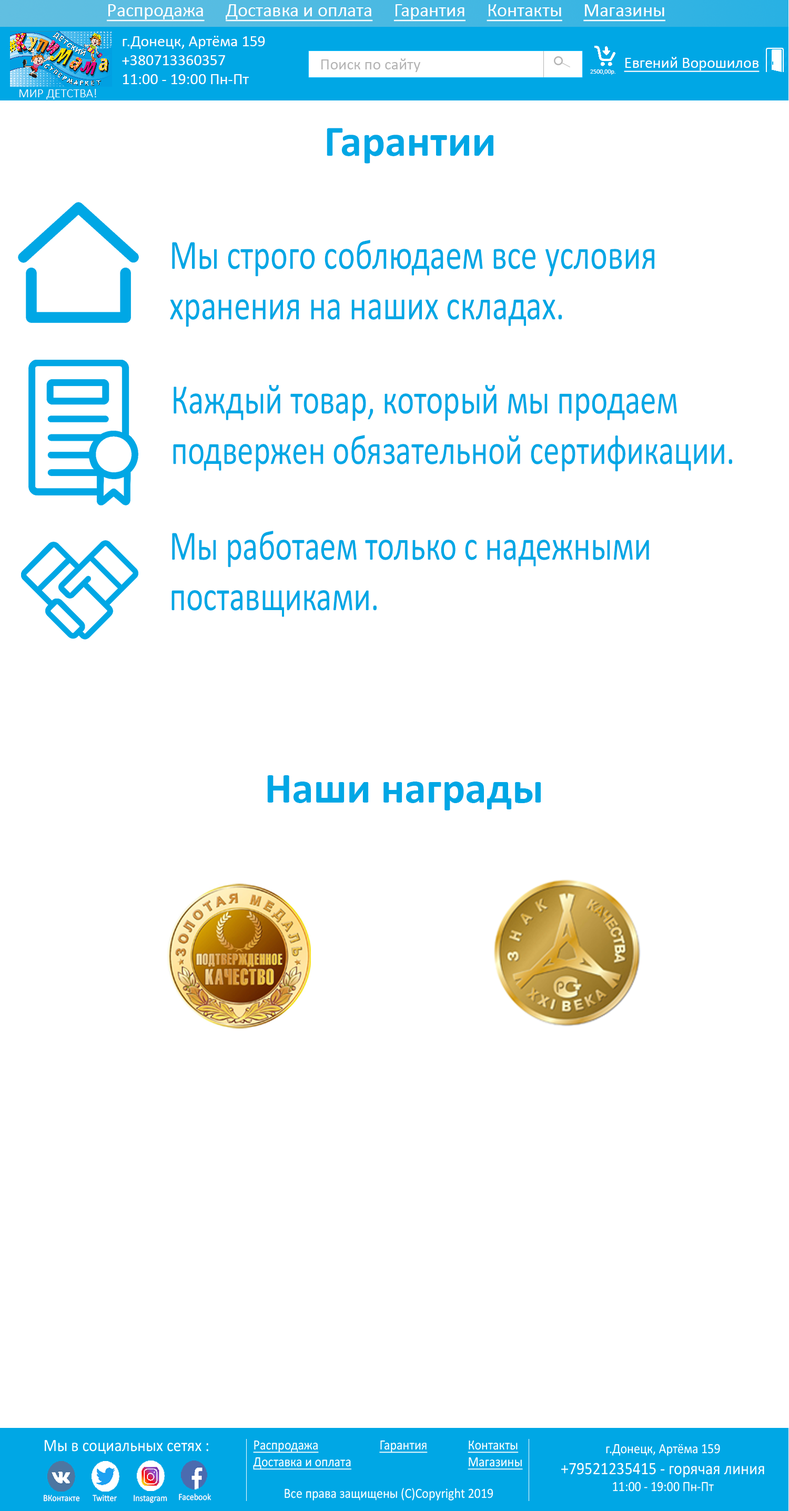
<style>
.page{position:relative;width:789px;height:1511px;background:#ffffff}
.page>*{position:absolute;margin:0}
.t1{font:18.9px "Calibri";color:#ffffff;text-decoration:underline}
.t2{font:15.8px "Calibri";color:#ffffff}
.t3{font:15.8px "Calibri";color:#b3b3b3}
.t4{font:15.8px "Calibri";color:#ffffff;text-decoration:underline}
.t5{font:6.3px "Calibri";color:#ffffff}
.t6{font:12.6px "Calibri-Light";color:#ffffff}
.t7{font:43.7px "Calibri-Bold";color:#00a7e5}
.t8{font:42.1px "Calibri";color:#00a7e5;scale:0.78 1}
.t9{font:42.1px "Calibri";color:#00a7e5;scale:0.77 1}
.t10{font:17.5px "Calibri";color:#ffffff;scale:0.9 1}
.t11{font:14px "Calibri";color:#ffffff;text-decoration:underline;scale:0.9 1}
.t12{font:14px "Calibri";color:#ffffff;scale:0.9 1}
.t13{font:9.3px "Calibri";color:#ffffff;scale:0.9 1}
</style>
<div class="page">
<p class="t1" style="left:107px;top:4px;width:558px;height:18px">Распродажа     Доставка и оплата     Гарантия     Контакты     Магазины</p>
<p class="t2" style="left:122px;top:36px;width:143px;height:48px">г.Донецк, Артёма 159<br>+380713360357<br>11:00 - 19:00 Пн-Пт</p>
<p class="t3" style="left:321px;top:58px;width:99px;height:14px">Поиск по сайту</p>
<p class="t4" style="left:624px;top:57px;width:136px;height:15px">Евгений Ворошилов</p>
<p class="t5" style="left:590px;top:69px;width:25px;height:6px">2500,00р.</p>
<p class="t6" style="left:19px;top:89px;width:77px;height:10px">МИР ДЕТСТВА!</p>
<p class="t7" style="left:327px;top:128px;width:166px;height:36px">Гарантии</p>
<p class="t8" style="left:170px;top:240px;width:484px;height:87px">Мы строго соблюдаем все условия <br>хранения на наших складах.</p>
<p class="t9" style="left:173px;top:385px;width:559px;height:87px">Каждый товар, который мы продаем<br>подвержен обязательной сертификации.</p>
<p class="t9" style="left:171px;top:531px;width:478px;height:86px">Мы работаем только с надежными<br>поставщиками.</p>
<p class="t7" style="left:267px;top:775px;width:274px;height:36px">Наши награды</p>
<p class="t10" style="left:45px;top:1440px;width:163px;height:14px">Мы в социальных сетях :</p>
<p class="t11" style="left:253px;top:1440px;width:98px;height:30px">Распродажа<br>Доставка и оплата</p>
<p class="t11" style="left:379px;top:1440px;width:49px;height:13px">Гарантия</p>
<p class="t11" style="left:468px;top:1440px;width:55px;height:30px">Контакты<br>Магазины</p>
<p class="t10" style="left:561px;top:1444px;width:203px;height:48px;text-align:center"><span class="t12">г.Донецк, Артёма 159<br></span>+79521235415 - горячая линия<br><span class="t12">11:00 - 19:00 Пн-Пт</span></p>
<p class="t13" style="left:179px;top:1493px;width:32px;height:8px">Facebook</p>
<p class="t12" style="left:285px;top:1488px;width:208px;height:13px">Все права защищены (С)Copyright 2019</p>
<p class="t13" style="left:44px;top:1495px;width:36px;height:7px">ВКонтакте</p>
<p class="t13" style="left:93px;top:1495px;width:24px;height:7px">Twitter</p>
<p class="t13" style="left:134px;top:1495px;width:33px;height:8px">Instagram</p>
</div>
